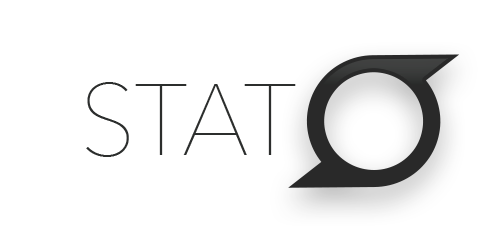
<style>
.page{position:relative;width:500px;height:250px;background:#ffffff}
.page>*{position:absolute;margin:0}
.t1{font:100px "AvenirNext-UltraLight";color:#2c2e2d}
</style>
<div class="page">
<p class="t1" style="left:86px;top:82px;width:210px;height:75px">STAT</p>
</div>
